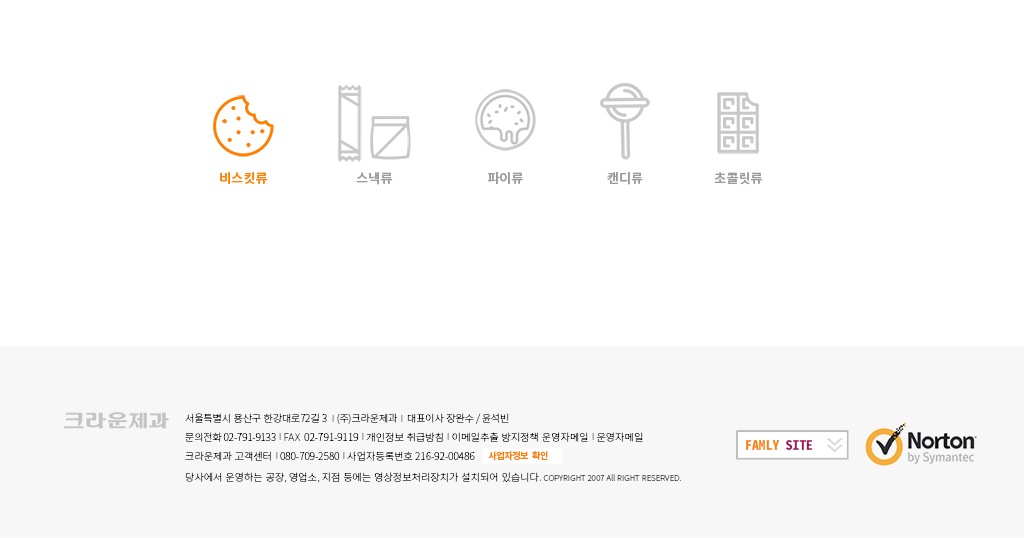
<style>
.page{position:relative;width:1024px;height:538px;background:#ffffff}
.page>*{position:absolute;margin:0}
.t1{font:13px "NotoSansMonoCJKkr-Bold";color:#ff7f00}
.t2{font:13px "NotoSansMonoCJKkr-Bold";color:#9a9b9c}
.t3{font:10.2px/21px "NotoSansCJKkr-Thin";color:#000000}
.t4{font:10.2px/19px "NotoSansCJKkr-Thin";letter-spacing:-0.02em;color:#000000}
.t5{font:6.8px/11.5px "AdobeMyungjoStd-Medium";color:#231f20}
.t6{font:10.2px/19px "NotoSansCJKkr-Thin";color:#000000}
.t7{font:8.2px/21px "NotoSansCJKkr-Thin";color:#000000}
.t8{font:13.5px "NotoSansMonoCJKkr-Bold";color:#ff7f00}
.t9{font:13.5px "NotoSansMonoCJKkr-Bold";color:#9f1758}
.t10{font:9.2px "NotoSansMonoCJKkr-Bold";letter-spacing:-0.06em;color:#ff7f00}
</style>
<div class="page">
<p class="t1" style="left:220px;top:172px;width:48px;height:12px">비스킷류</p>
<p class="t2" style="left:356px;top:172px;width:37px;height:13px">스낵류</p>
<p class="t2" style="left:488px;top:172px;width:35px;height:12px">파이류</p>
<p class="t2" style="left:607px;top:172px;width:36px;height:13px">캔디류</p>
<p class="t2" style="left:714px;top:172px;width:49px;height:13px">초콜릿류</p>
<p class="t3" style="left:185px;top:413px;width:496px;height:70px"><span class="t4">서울특별시 용산구 한강대로72길 3  </span><span class="t5">│</span><span class="t4">(주)크라운제과 </span><span class="t5">│</span><span class="t4"> 대표이사 장완수 / 윤석빈<br>문의전화 02-791-9133 </span><span class="t5">│</span><span class="t6">FAX  02-791-9119 </span><span class="t5">│</span><span class="t6">개인정보 취급방침 </span><span class="t5">│</span><span class="t6">이메일추출 방지정책 운영자메일 </span><span class="t5">│</span><span class="t6">운영자메일<br>크라운제과 고객센터 </span><span class="t5">│</span><span class="t6">080-709-2580 </span><span class="t5">│</span><span class="t6">사업자등록번호 216-92-00486<br></span>당사에서 운영하는 공장, 영업소, 지점 등에는 영상정보처리장치가 설치되어 있습니다. <span class="t7">COPYRIGHT 2007 All RIGHT RESERVED.</span></p>
<p class="t8" style="left:746px;top:440px;width:67px;height:10px">FAMLY <span class="t9">SITE</span></p>
<p class="t10" style="left:488px;top:451px;width:60px;height:10px">사업자정보 확인</p>
</div>
